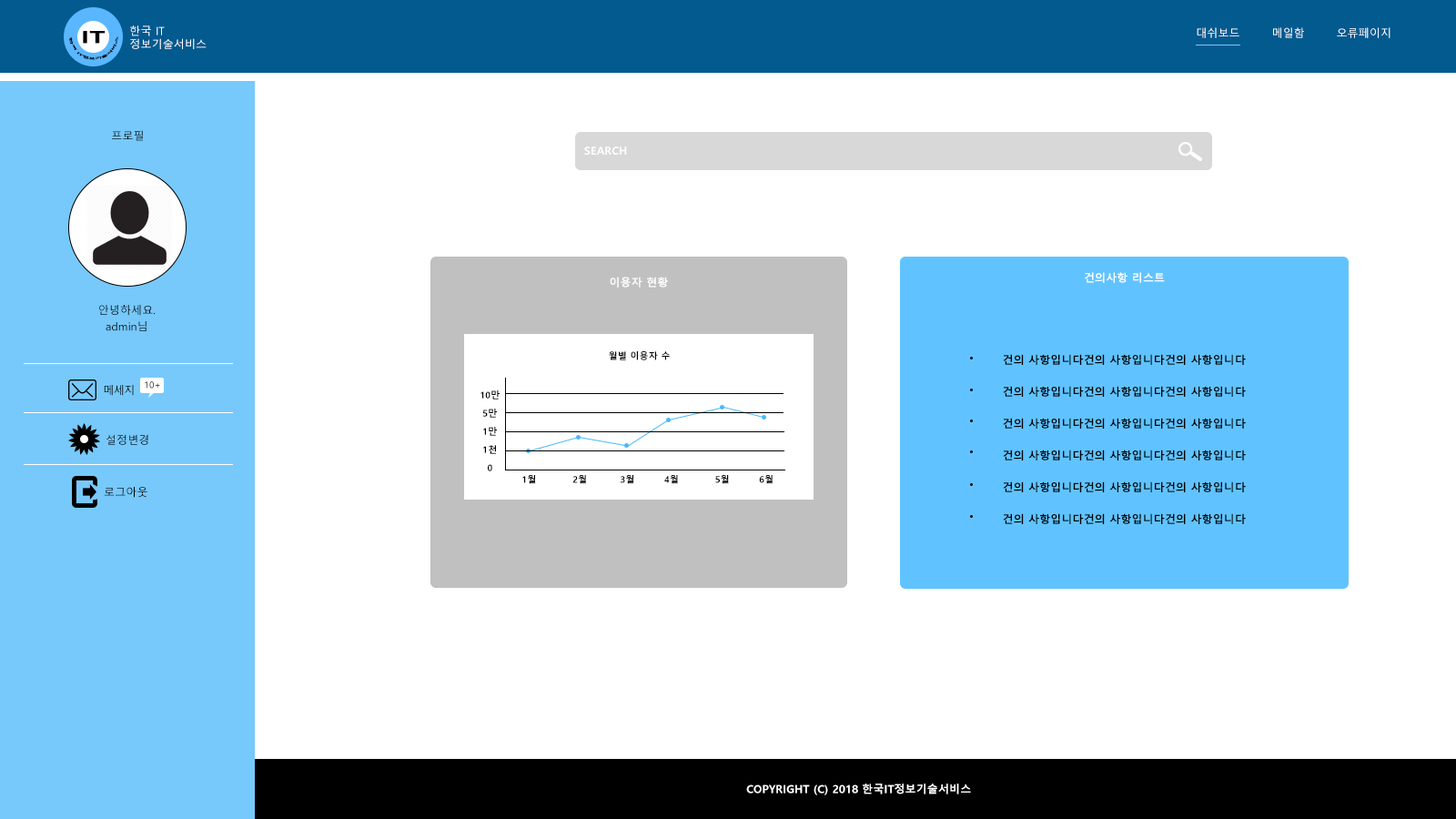
<style>
.page{position:relative;width:1456px;height:819px;background:#ffffff}
.page>*{position:absolute;margin:0}
.t1{font:10.9px "MalgunGothic";letter-spacing:0.01em;color:#ffffff}
.t2{font:2.7px "MalgunGothicBold";letter-spacing:-0.01em;color:#000000;scale:1.6 1}
.t3{font:16.4px "MalgunGothicBold";letter-spacing:-0.01em;color:#000000;font-weight:bold;scale:1.6 1}
.t4{font:10.9px "MalgunGothic";letter-spacing:0.01em;color:#000000}
.t5{font:10.9px "MalgunGothicBold";letter-spacing:0.01em;color:#ffffff}
.t6{font:10.9px/16.4px "MalgunGothic";letter-spacing:0.01em;color:#000000}
.t7{font:9.1px "MalgunGothicBold";letter-spacing:0.01em;color:#000000}
.t8{font:10.9px/31.8px "MalgunGothicBold";letter-spacing:0.01em;color:#000000}
.t9{font:9.1px "MalgunGothic";letter-spacing:0.01em}
.t10{font:9.1px/18.2px "MalgunGothicBold";letter-spacing:0.01em;color:#000000}
</style>
<div class="page">
<p class="t1" style="left:130px;top:25px;width:77px;height:24px">한국 IT<br>정보기술서비스</p>
<p class="t1" style="left:1197px;top:27px;width:193px;height:11px">대쉬보드        메일함        오류페이지</p>
<p class="t2" style="left:69px;top:36px;width:49px;height:24px;text-align:center">한국 IT정보기술서비스</p>
<p class="t3" style="left:83px;top:31px;width:23px;height:13px">IT</p>
<p class="t4" style="left:112px;top:130px;width:31px;height:11px">프로필</p>
<p class="t5" style="left:584px;top:147px;width:43px;height:8px">SEARCH</p>
<p class="t5" style="left:610px;top:277px;width:58px;height:11px">이용자 현황</p>
<p class="t5" style="left:1085px;top:272px;width:80px;height:11px">건의사항 리스트</p>
<p class="t6" style="left:99px;top:305px;width:57px;height:26px;text-align:center">안녕하세요.<br>admin님</p>
<p class="t7" style="left:609px;top:351px;width:61px;height:9px">월별 이용자 수</p>
<p class="t8" style="left:1003px;top:354px;width:243px;height:170px">건의 사항입니다건의 사항입니다건의 사항입니다<br>건의 사항입니다건의 사항입니다건의 사항입니다<br>건의 사항입니다건의 사항입니다건의 사항입니다<br>건의 사항입니다건의 사항입니다건의 사항입니다<br>건의 사항입니다건의 사항입니다건의 사항입니다<br>건의 사항입니다건의 사항입니다건의 사항입니다</p>
<p class="t4" style="left:104px;top:385px;width:30px;height:11px">메세지</p>
<p class="t9" style="left:145px;top:381px;width:15px;height:8px">10+</p>
<p class="t10" style="left:480px;top:390px;width:20px;height:81px;text-align:center">10만<br>5만<br>1만<br>1천<br>0</p>
<p class="t4" style="left:106px;top:434px;width:42px;height:11px">설정변경</p>
<p class="t7" style="left:522px;top:475px;width:251px;height:9px">1월           2월          3월         4월           5월         6월</p>
<p class="t4" style="left:104px;top:487px;width:43px;height:11px">로그아웃</p>
<p class="t5" style="left:746px;top:783px;width:225px;height:12px">COPYRIGHT (C) 2018 한국IT정보기술서비스</p>
<p class="t5" style="left:746px;top:783px;width:225px;height:12px">COPYRIGHT (C) 2018 한국IT정보기술서비스</p>
</div>
